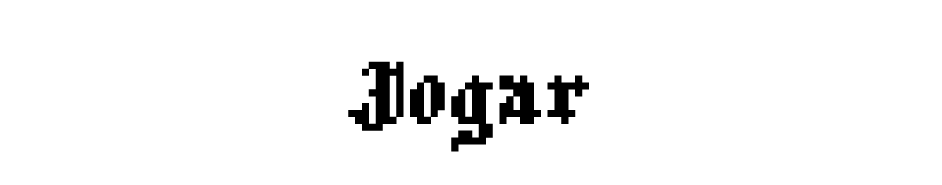
<style>
.page{position:relative;width:942px;height:185px;background:#ffffff}
.page>*{position:absolute;margin:0}
.t1{font:110px "OwreKynge";color:#000000}
</style>
<div class="page">
<p class="t1" style="left:348px;top:61px;width:241px;height:91px">Jogar</p>
</div>
